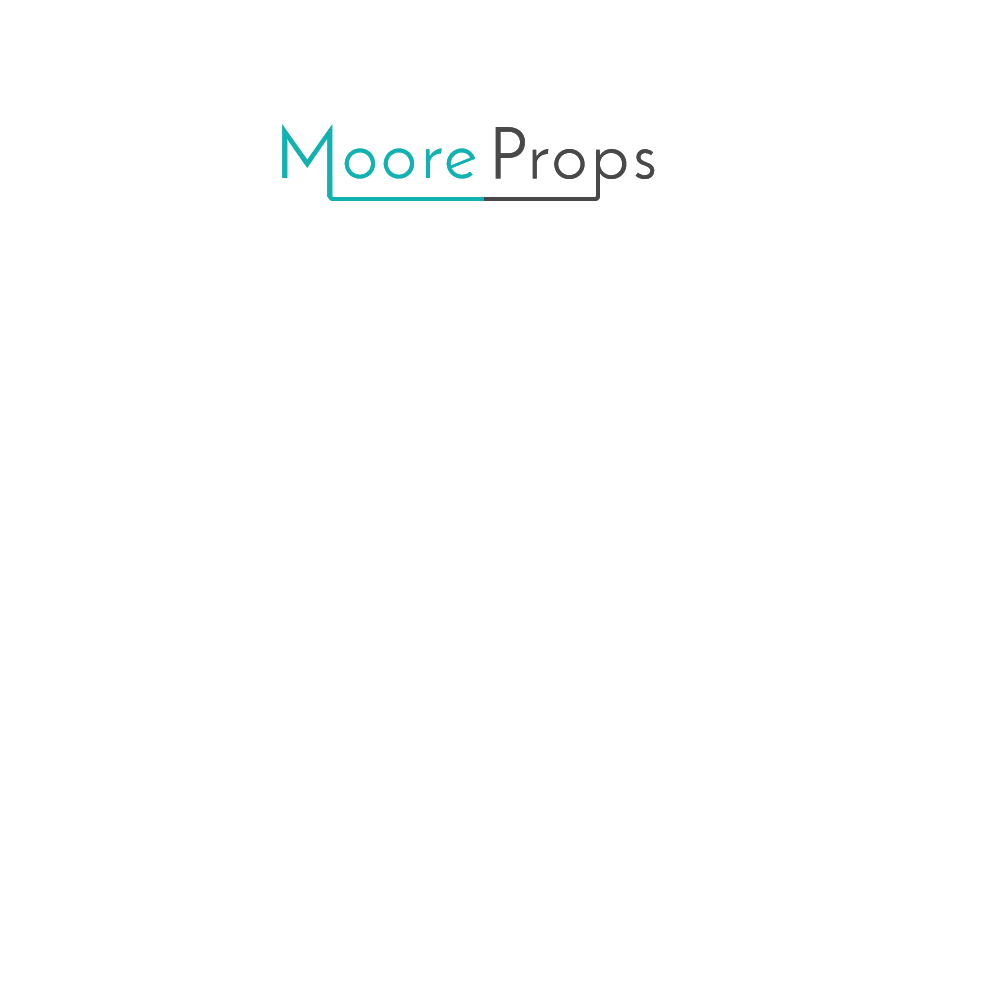
<style>
.page{position:relative;width:1000px;height:1000px;background:#ffffff}
.page>*{position:absolute;margin:0}
.t1{font:72px "JosefinSans";letter-spacing:0.05em;color:#10b3b1}
.t2{font:72px "JosefinSans";letter-spacing:0.05em;color:#494949}
</style>
<div class="page">
<p class="t1" style="left:282px;top:124px;width:194px;height:55px">Moore</p>
<p class="t2" style="left:495px;top:127px;width:160px;height:66px">Props</p>
</div>
